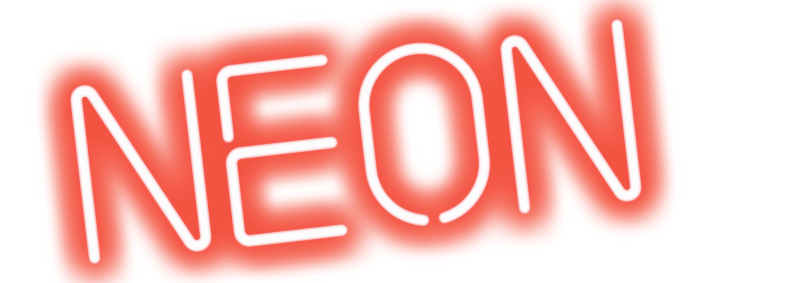
<style>
.page{position:relative;width:799px;height:283px;background:#ffffff}
.page>*{position:absolute;margin:0}
.t1{font:229.2px "NeonTubes2-Regular";color:#fdfafa}
</style>
<div class="page">
<p class="t1" style="left:70px;top:18px;width:572px;height:247px;rotate:-7deg">NEON</p>
</div>
